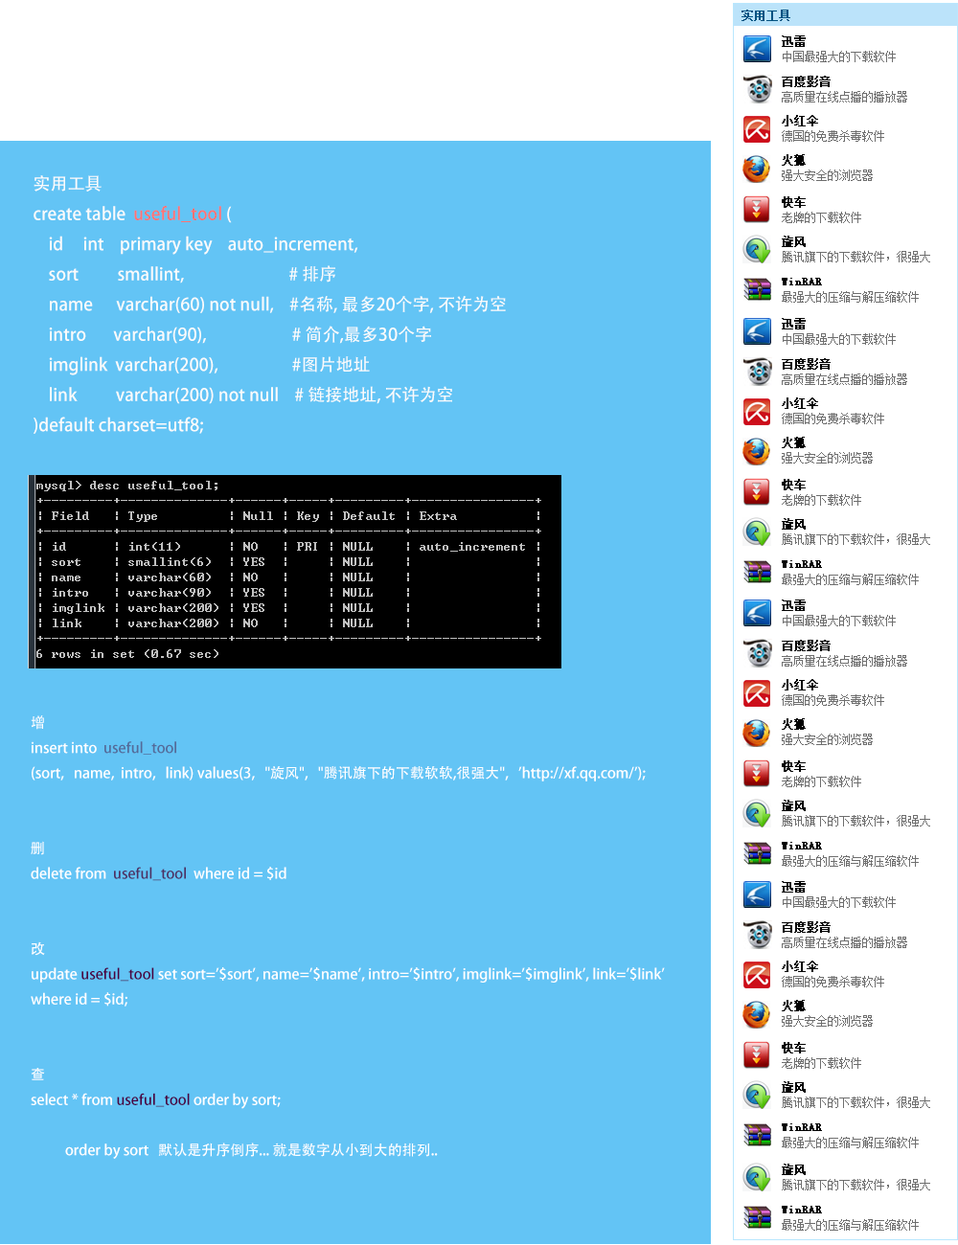
<style>
.page{position:relative;width:958px;height:1245px;background:#63c4f5}
.page>*{position:absolute;margin:0}
.t1{font:11.5px "NSimSun";color:#005281;font-weight:bold}
.t2{font:11.5px/15.3px "NSimSun";color:#6e6e6e}
.t3{font:11.5px/15.3px "NSimSun";color:#010101;font-weight:bold}
.t4{font:17.2px "AdobeHeitiStd-Regular";color:#fbfbfb}
.t5{font:17.2px "AdobeHeitiStd-Regular";color:#ff7373}
.t6{font:14.4px "AdobeHeitiStd-Regular";color:#ffffff}
.t7{font:14.4px "AdobeHeitiStd-Regular";color:#546b9a}
.t8{font:14.4px "AdobeHeitiStd-Regular";color:#4d2f63}
.t9{font:14.4px "AdobeHeitiStd-Regular";color:#490143}
</style>
<div class="page">
<p class="t1" style="left:741px;top:10px;width:49px;height:11px">实用工具</p>
<p class="t2" style="left:782px;top:35px;width:113px;height:27px"><span class="t3">迅雷<br></span>中国最强大的下载软件</p>
<p class="t2" style="left:782px;top:76px;width:125px;height:26px"><span class="t3">百度影音<br></span>高质量在线点播的播放器</p>
<p class="t2" style="left:782px;top:115px;width:102px;height:27px"><span class="t3">小红伞<br></span>德国的免费杀毒软件</p>
<p class="t2" style="left:782px;top:154px;width:90px;height:27px"><span class="t3">火狐<br></span>强大安全的浏览器</p>
<p class="t4" style="left:34px;top:175px;width:472px;height:259px">实用工具<br>create table  <span class="t5">useful_tool </span>(<br>    id     int    primary key    auto_increment, <br>    sort          smallint,                           # 排序<br>    name      varchar(60) not null,    #名称, 最多20个字, 不许为空<br>    intro       varchar(90),                      # 简介,最多30个字<br>    imglink  varchar(200),                   #图片地址<br>    link          varchar(200) not null    # 链接地址, 不许为空<br>)default charset=utf8;</p>
<p class="t2" style="left:782px;top:196px;width:79px;height:27px"><span class="t3">快车<br></span>老牌的下载软件</p>
<p class="t2" style="left:782px;top:236px;width:148px;height:26px"><span class="t3">旋风<br></span>腾讯旗下的下载软件，很强大</p>
<p class="t2" style="left:782px;top:278px;width:136px;height:25px"><span class="t3">WinRAR<br></span>最强大的压缩与解压缩软件</p>
<p class="t6" style="left:31px;top:715px;width:634px;height:444px">增<br>insert into  <span class="t7">useful_tool<br></span>(sort,   name,  intro,   link) values(3,   "旋风",   "腾讯旗下的下载软软,很强大",   'http://xf.qq.com/');<br><br><br>删<br>delete from  <span class="t8">useful_tool</span>  where id = $id<br><br><br>改<br>update <span class="t9">useful_tool</span> set sort='$sort', name='$name', intro='$intro', imglink='$imglink', link='$link' <br>where id = $id;<br><br><br>查<br>select * from <span class="t9">useful_tool </span>order by sort;<br><br> order by sort   默认是升序倒序... 就是数字从小到大的排列..</p>
</div>
